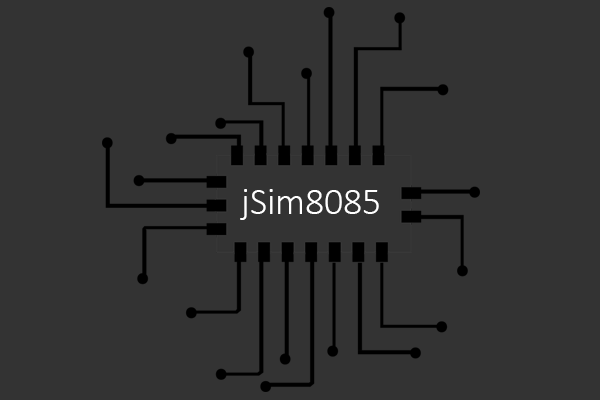
<style>
.page{position:relative;width:600px;height:400px;background:#333333}
.page>*{position:absolute;margin:0}
.t1{font:37.5px "Calibri-Light";color:#ffffff}
</style>
<div class="page">
<p class="t1" style="left:240px;top:189px;width:139px;height:31px">jSim8085</p>
</div>
